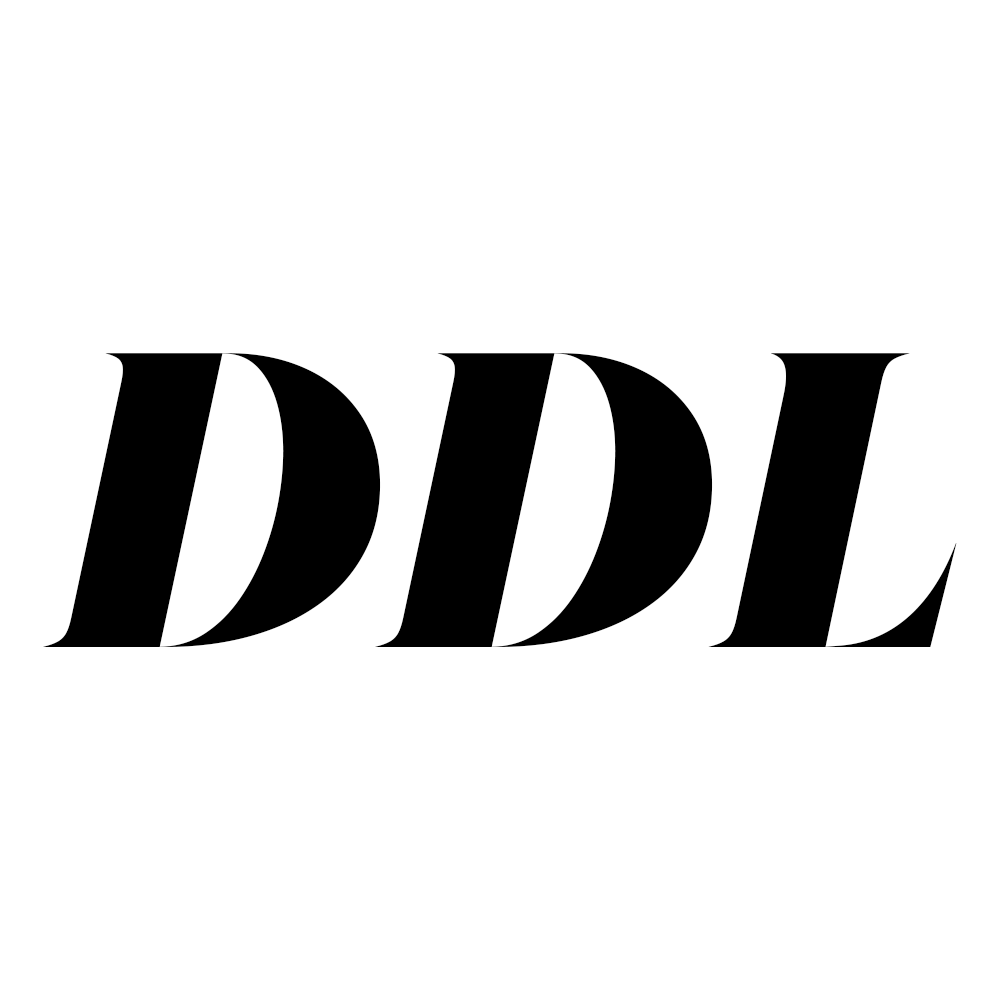
<style>
.page{position:relative;width:1000px;height:1000px;background:#ffffff}
.page>*{position:absolute;margin:0}
.t1{font:416.7px "NewYork-BlackItalic";color:#000000}
</style>
<div class="page">
<p class="t1" style="left:43px;top:353px;width:914px;height:294px">DDL</p>
</div>
